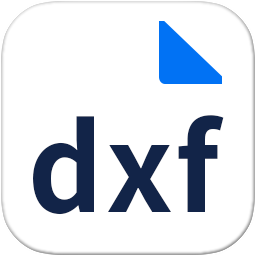
<style>
.page{position:relative;width:256px;height:256px;background:#ffffff}
.page>*{position:absolute;margin:0}
.t1{font:118.8px "SourceHanSansCN-Bold";letter-spacing:0.018em;color:#122448}
</style>
<div class="page">
<p class="t1" style="left:33px;top:115px;width:191px;height:100px">dxf</p>
</div>
